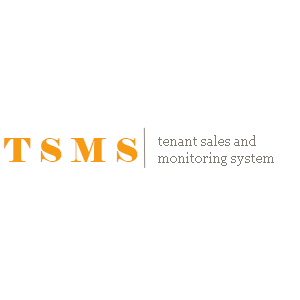
<style>
.page{position:relative;width:300px;height:300px;background:#ffffff}
.page>*{position:absolute;margin:0}
.t1{font:13.9px "Georgia";color:#807a72}
.t2{font:33.3px "Elephant-Regular";color:#f79a14}
</style>
<div class="page">
<p class="t1" style="left:158px;top:135px;width:116px;height:31px">tenant sales and<br>monitoring system</p>
<p class="t2" style="left:4px;top:138px;width:134px;height:24px">T S M S</p>
</div>
